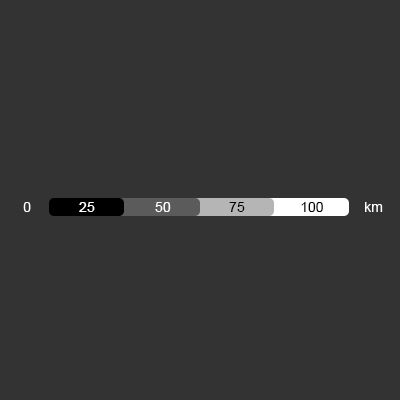
<style>
.page{position:relative;width:400px;height:400px;background:#333333}
.page>*{position:absolute;margin:0}
.t1{font:14px "ArialMT";color:#ffffff}
.t2{font:14px "ArialMT";color:#000000}
</style>
<div class="page">
<p class="t1" style="left:23px;top:202px;width:8px;height:10px">0</p>
<p class="t1" style="left:79px;top:202px;width:16px;height:10px">25</p>
<p class="t1" style="left:155px;top:202px;width:16px;height:10px">50</p>
<p class="t2" style="left:229px;top:202px;width:16px;height:10px">75</p>
<p class="t2" style="left:301px;top:202px;width:22px;height:10px">100</p>
<p class="t1" style="left:365px;top:202px;width:18px;height:10px">km</p>
</div>
